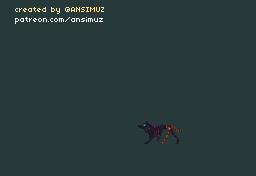
<style>
.page{position:relative;width:256px;height:176px;background:#273938}
.page>*{position:absolute;margin:0}
.t1{font:8.1px "04b03";color:#fbdb8d}
.t2{font:8.1px "04b03";color:#fefefe}
</style>
<div class="page">
<p class="t1" style="left:15px;top:7px;width:89px;height:17px">created by @ANSIMUZ<br><span class="t2">patreon.com/ansimuz</span></p>
</div>
